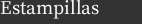
<style>
.page{position:relative;width:142px;height:24px;background:#333333}
.page>*{position:absolute;margin:0}
.t1{font:21px "OfficialFateFont-Medium";color:#ffffff}
</style>
<div class="page">
<p class="t1" style="left:0px;top:0px;width:99px;height:19px">Estampillas</p>
</div>
